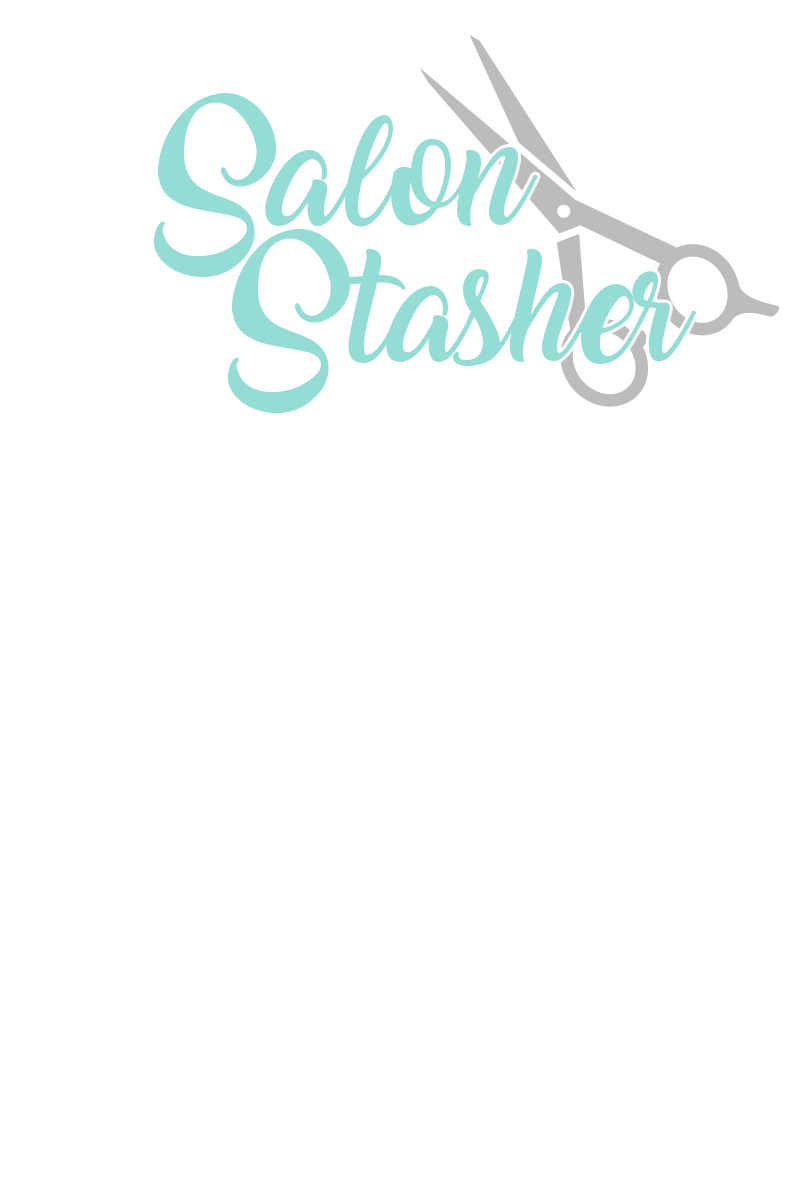
<style>
.page{position:relative;width:800px;height:1200px;background:#ffffff}
.page>*{position:absolute;margin:0}
.t1{font:100px "Amarillo";color:#95dcd5}
</style>
<div class="page">
<p class="t1" style="left:153px;top:93px;width:385px;height:184px">Salon</p>
<p class="t1" style="left:227px;top:229px;width:470px;height:184px">Stasher</p>
</div>
